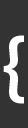
<style>
.page{position:relative;width:28px;height:128px;background:#333333}
.page>*{position:absolute;margin:0}
.t1{font:75px "AdobeGothicStd-Bold";color:#ffffff}
</style>
<div class="page">
<p class="t1" style="left:3px;top:35px;width:21px;height:69px;rotate:180deg">{</p>
</div>
